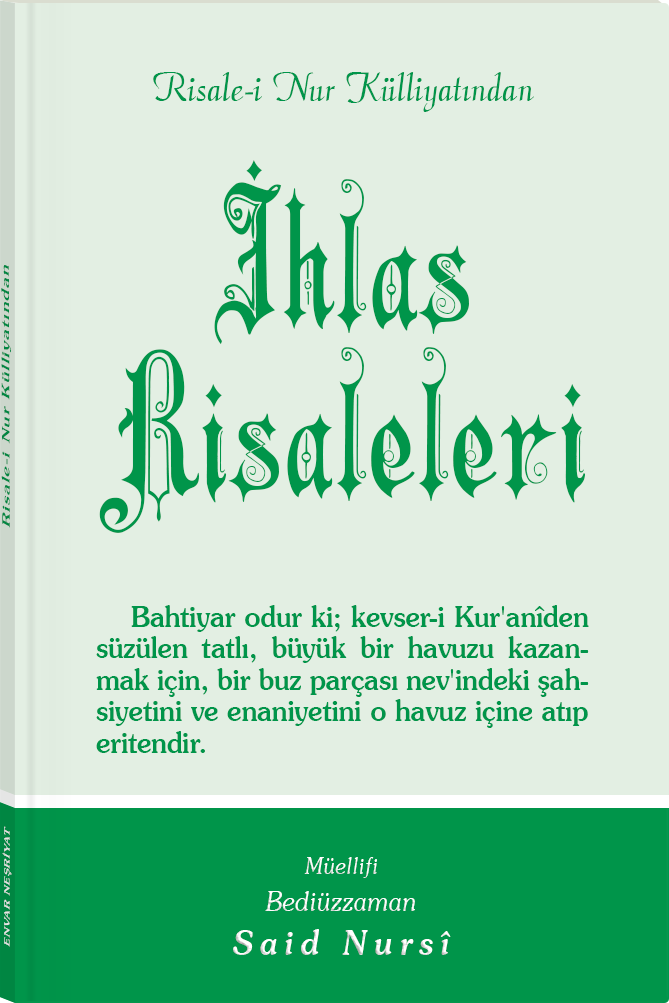
<style>
.page{position:relative;width:669px;height:1003px;background:#e3efe3}
.page>*{position:absolute;margin:0}
.t1{font:45.3px "Barla © 072 Aria ScriptScriptSSi";color:#00954a;scale:0.94 1}
.t2{font:188.9px/168.6px "Barla © 001 Liva Nur";letter-spacing:-0.001em;color:#00954a;scale:0.93 1}
.t3{font:11.4px "Souvenir-Medium";letter-spacing:0.08em;color:#00954a;scale:1.65 1}
.t4{font:28.9px/31.5px "Souvenir-Medium";color:#00954a;scale:0.92 1}
.t5{font:8.3px "Souvenir-Medium";letter-spacing:0.08em;color:#e5e5e5;scale:1.43 1}
.t6{font:27.1px/37.8px "Souvenir-LightItalic";color:#ffffff;scale:0.92 1}
.t7{font:22.8px/39.8px "Souvenir-LightItalic";color:#ffffff;scale:0.92 1}
.t8{font:33.9px/43.8px "Souvenir-MediumItalic";letter-spacing:0.2em;color:#ffffff;scale:0.92 1}
</style>
<div class="page">
<p class="t1" style="left:153px;top:72px;width:381px;height:40px">Risale-i Nur Külliyatından</p>
<p class="t2" style="left:99px;top:160px;width:486px;height:373px;text-align:center">İhlas<br>Risaleleri</p>
<p class="t3" style="left:1px;top:265px;width:10px;height:263px;rotate:-90deg">Risale-i Nur Külliyatından</p>
<p class="t4" style="left:96px;top:605px;width:493px;height:148px;text-align:justify">Bahtiyar odur ki; kevser-i Kur'anîden süzülen tatlı, büyük bir havuzu kazanmak için, bir buz parçası nev'indeki şahsiyetini ve enaniyetini o havuz içine atıp eritendir.</p>
<p class="t5" style="left:2px;top:826px;width:10px;height:121px;rotate:-90deg">ENVAR NEŞRİYAT</p>
<p class="t6" style="left:233px;top:857px;width:218px;height:98px;text-align:center"><span class="t7">Müellifi<br></span>Bediüzzaman<br><span class="t8">Said Nursî</span></p>
</div>
